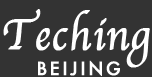
<style>
.page{position:relative;width:152px;height:77px;background:#333333}
.page>*{position:absolute;margin:0}
.t1{font:77.8px "Apple-Chancery";letter-spacing:0.01em;color:#ffffff;font-weight:bold;scale:0.91 1}
.t2{font:30.6px "Futura-Medium";letter-spacing:0.1em;color:#ffffff;text-transform:uppercase;font-weight:bold}
</style>
<div class="page">
<p class="t1" style="left:3px;top:9px;width:147px;height:59px">Teching</p>
<p class="t2" style="left:38px;top:60px;width:82px;height:16px">beijing</p>
</div>
